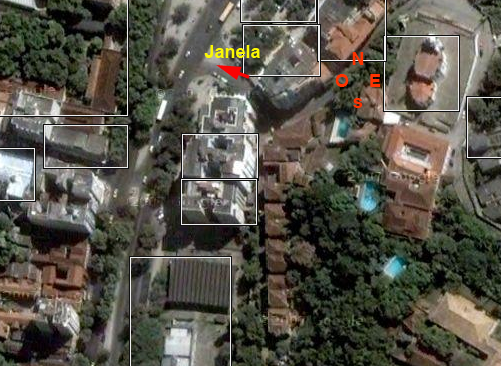
<style>
.page{position:relative;width:501px;height:366px}
.page>*{position:absolute;margin:0}
.t1{font:18px "Arial-BoldMT";color:#faf705}
.t2{font:18px "Arial-BoldMT";color:#ff3300}
</style>
<div class="page">
<p class="t1" style="left:204px;top:45px;width:56px;height:13px">Janela</p>
<p class="t2" style="left:335px;top:52px;width:46px;height:56px;text-align:center">N<br>O    E<br>s</p>
</div>
